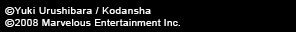
<style>
.page{position:relative;width:296px;height:32px;background:#000000}
.page>*{position:absolute;margin:0}
.t1{font:9px/12px "ArialMT";letter-spacing:0.03em;color:#f8f8f8;scale:1.11 1}
.t2{font:10.8px/12px "ArialMT";letter-spacing:0.03em;color:#f8f8f8;scale:1.11 1}
.t3{font:9px/12px "ArialMT";letter-spacing:0.05em;color:#f8f8f8;scale:1.11 1}
.t4{font:9px/12px "ArialMT";letter-spacing:0.04em;color:#f8f8f8;scale:1.11 1}
</style>
<div class="page">
<p class="t1" style="left:5px;top:7px;width:175px;height:20px"><span class="t2">©</span><span class="t3">Yuki </span><span class="t4">Urushi</span><span class="t3">bara / Kodansha<br></span><span class="t2">©</span>2008 Marvelous Entertainment Inc.</p>
</div>
